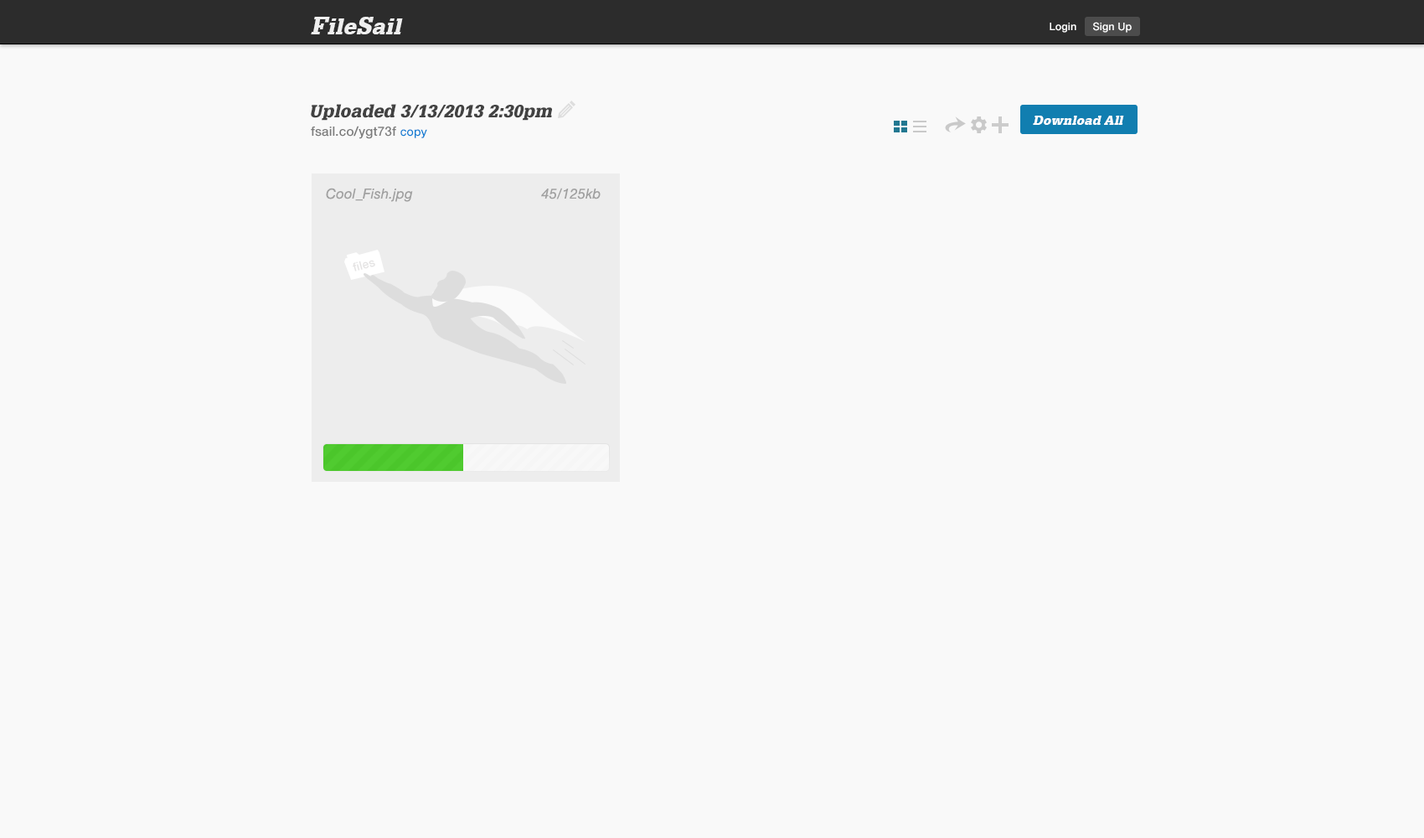
<style>
.page{position:relative;width:1424px;height:838px;background:#f9f9f9}
.page>*{position:absolute;margin:0}
.t1{font:22.1px "GlyphaLT-BlackOblique";letter-spacing:0.025em;color:#eeeeee}
.t2{font:24.4px "GlyphaLT-BlackOblique";letter-spacing:0.025em;color:#eeeeee}
.t3{font:10.5px "HelveticaNeue-Medium";letter-spacing:0.01em;color:#ffffff}
.t4{font:17.4px "GlyphaLT-BlackOblique";letter-spacing:0.01em;color:#424242}
.t5{font:12.8px "HelveticaNeue-Medium";letter-spacing:0.01em;color:#7b7b7b}
.t6{font:11.6px "HelveticaNeue-Medium";letter-spacing:0.01em;color:#127fd3}
.t7{font:12.8px "GlyphaLT-BlackOblique";letter-spacing:0.01em;color:#ffffff}
.t8{font:14px "HelveticaNeue-Italic";letter-spacing:0.01em;color:#a0a0a0}
.t9{font:11.6px "HelveticaNeue-Medium";letter-spacing:0.01em;color:#e4e3e3}
</style>
<div class="page">
<p class="t1" style="left:311px;top:17px;width:92px;height:17px"><span class="t2">F</span>ile<span class="t2">S</span>ail</p>
<p class="t3" style="left:1049px;top:23px;width:27px;height:10px">Login</p>
<p class="t3" style="left:1093px;top:22px;width:38px;height:11px">Sign Up</p>
<p class="t4" style="left:311px;top:104px;width:241px;height:17px">Uploaded 3/13/2013 2:30pm</p>
<p class="t5" style="left:311px;top:126px;width:116px;height:13px">fsail.co/ygt73f <span class="t6">copy</span></p>
<p class="t7" style="left:1033px;top:116px;width:91px;height:9px">Download All</p>
<p class="t8" style="left:326px;top:188px;width:274px;height:14px">Cool_Fish.jpg                                45/125kb</p>
<p class="t9" style="left:353px;top:260px;width:22px;height:11px;rotate:-15deg">files</p>
</div>
